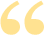
<style>
.page{position:relative;width:44px;height:35px;background:#ffffff}
.page>*{position:absolute;margin:0}
.t1{font:99.3px "Georgia-Bold";color:#ffe291}
</style>
<div class="page">
<p class="t1" style="left:0px;top:0px;width:44px;height:35px">“</p>
</div>
